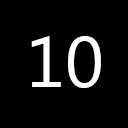
<style>
.page{position:relative;width:128px;height:128px;background:#000000}
.page>*{position:absolute;margin:0}
.t1{font:72px "KhmerUI";color:#ffffff}
</style>
<div class="page">
<p class="t1" style="left:31px;top:36px;width:70px;height:52px">10</p>
</div>
